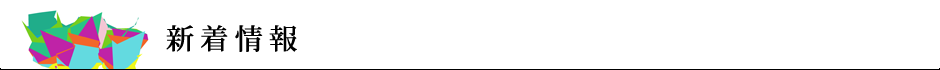
<style>
.page{position:relative;width:940px;height:70px;background:#ffffff}
.page>*{position:absolute;margin:0}
.t1{font:28px "KozMinPr6N-Medium";letter-spacing:0.2em;color:#000000;font-weight:bold}
</style>
<div class="page">
<p class="t1" style="left:166px;top:25px;width:131px;height:27px">新着情報</p>
</div>
